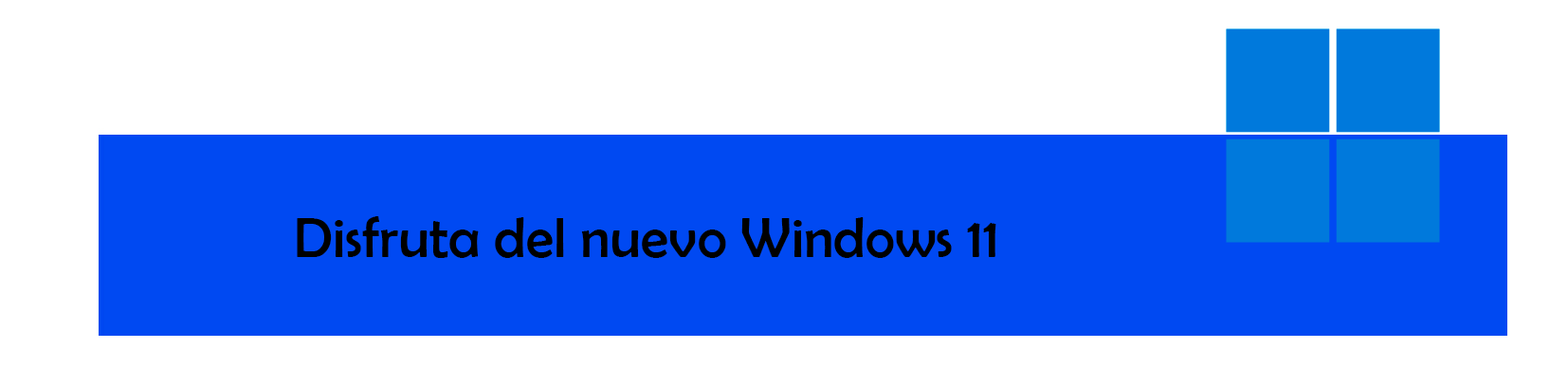
<style>
.page{position:relative;width:1568px;height:386px;background:#ffffff}
.page>*{position:absolute;margin:0}
.t1{font:56.9px "BerlinSansFB-Reg";color:#000000}
</style>
<div class="page">
<p class="t1" style="left:297px;top:216px;width:699px;height:42px">Disfruta del nuevo Windows 11</p>
</div>
